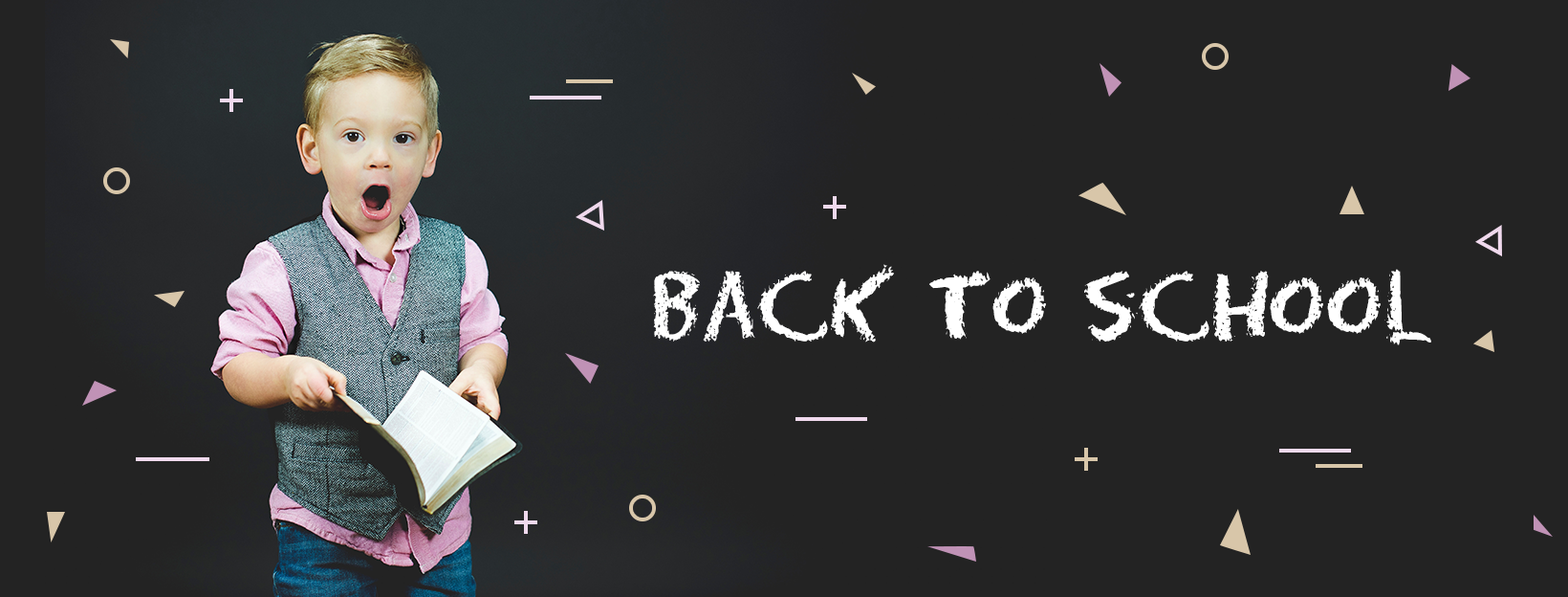
<style>
.page{position:relative;width:1568px;height:597px;background:#232323}
.page>*{position:absolute;margin:0}
.t1{font:88px "Eraser-Regular";color:#ffffff}
</style>
<div class="page">
<p class="t1" style="left:653px;top:264px;width:778px;height:81px">Back To school</p>
</div>
